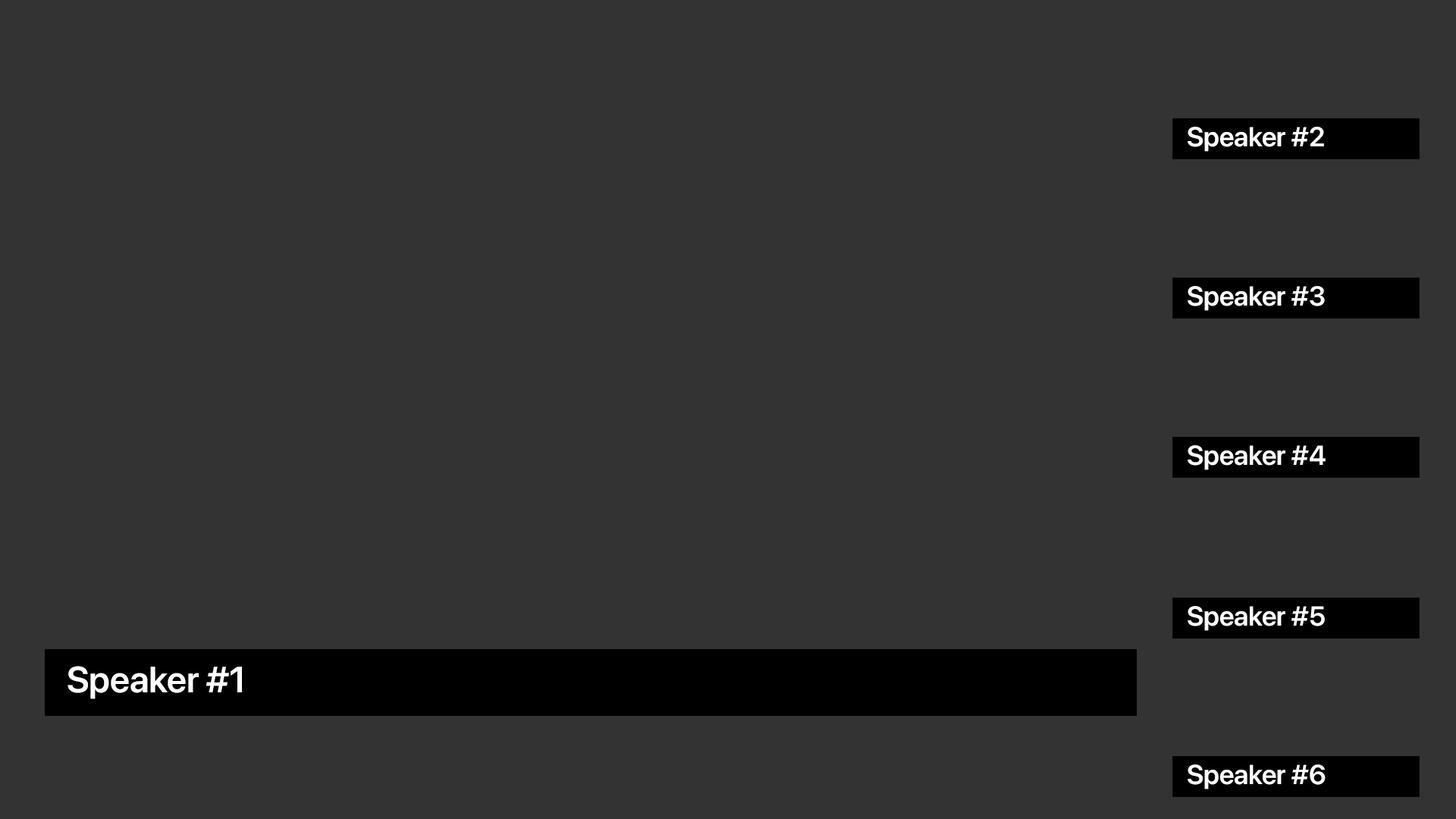
<style>
.page{position:relative;width:1456px;height:819px;background:#333333}
.page>*{position:absolute;margin:0}
.t1{font:27.3px "SFProDisplay-Semibold";color:#ffffff}
.t2{font:36.4px "SFProDisplay-Semibold";color:#ffffff}
</style>
<div class="page">
<p class="t1" style="left:1188px;top:127px;width:136px;height:25px">Speaker #2</p>
<p class="t1" style="left:1188px;top:286px;width:137px;height:25px">Speaker #3</p>
<p class="t1" style="left:1188px;top:445px;width:138px;height:25px">Speaker #4</p>
<p class="t1" style="left:1188px;top:606px;width:137px;height:25px">Speaker #5</p>
<p class="t2" style="left:67px;top:666px;width:175px;height:33px">Speaker #1</p>
<p class="t1" style="left:1188px;top:764px;width:138px;height:25px">Speaker #6</p>
</div>
